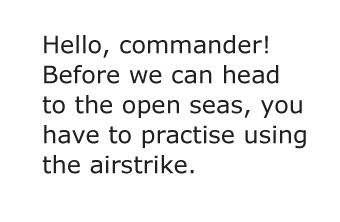
<style>
.page{position:relative;width:340px;height:222px;background:#ffffff}
.page>*{position:absolute;margin:0}
.t1{font:24px/30px "Verdana";color:#202020}
</style>
<div class="page">
<p class="t1" style="left:42px;top:35px;width:264px;height:139px">Hello, commander! Before we can head to the open seas, you have to practise using the airstrike.</p>
</div>
